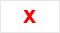
<style>
.page{position:relative;width:60px;height:33px;background:#ffffff}
.page>*{position:absolute;margin:0}
.t1{font:24px "Arial-BoldMT";letter-spacing:0.02em;color:#fe0000}
</style>
<div class="page">
<p class="t1" style="left:23px;top:10px;width:13px;height:13px">x</p>
</div>
